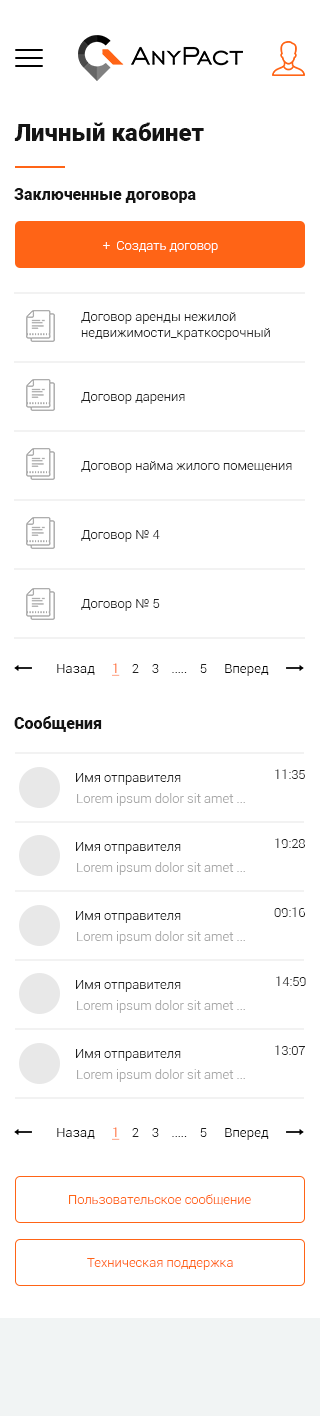
<style>
.page{position:relative;width:320px;height:1416px;background:#ffffff}
.page>*{position:absolute;margin:0}
.t1{font:24px "Roboto-Black";color:#141414}
.t2{font:16px "Roboto-Black";color:#141414}
.t3{font:13px "Roboto-Light";color:#ffffff}
.t4{font:13px "Roboto-Light";color:#1d1d1d}
.t5{font:13px "Roboto-Light";letter-spacing:0.015em;color:#000000}
.t6{font:13px "Roboto-Light";color:#ff6416;text-decoration:underline}
.t7{font:13px "Roboto-Light";color:#a8a8a8}
.t8{font:13px "Roboto-Light";color:#ff6416}
</style>
<div class="page">
<p class="t1" style="left:14px;top:122px;width:190px;height:19px">Личный кабинет</p>
<p class="t2" style="left:14px;top:188px;width:182px;height:15px">Заключенные договора</p>
<p class="t3" style="left:103px;top:241px;width:115px;height:12px">+  Создать договор</p>
<p class="t4" style="left:81px;top:312px;width:189px;height:28px">Договор аренды нежилой<br>недвижимости_краткосрочный</p>
<p class="t4" style="left:81px;top:392px;width:104px;height:12px">Договор дарения</p>
<p class="t4" style="left:81px;top:461px;width:211px;height:12px">Договор найма жилого помещения</p>
<p class="t4" style="left:81px;top:530px;width:79px;height:12px">Договор № 4</p>
<p class="t4" style="left:81px;top:599px;width:79px;height:12px">Договор № 5</p>
<p class="t5" style="left:57px;top:664px;width:38px;height:11px">Назад</p>
<p class="t4" style="left:112px;top:663px;width:95px;height:13px"><span class="t6">1</span>    2    3    .....    5</p>
<p class="t5" style="left:225px;top:664px;width:44px;height:12px">Вперед</p>
<p class="t2" style="left:14px;top:716px;width:88px;height:16px">Сообщения</p>
<p class="t4" style="left:76px;top:773px;width:105px;height:12px">Имя отправителя</p>
<p class="t4" style="left:275px;top:769px;width:30px;height:10px">11:35</p>
<p class="t7" style="left:77px;top:793px;width:168px;height:13px">Lorem ipsum dolor sit amet ...</p>
<p class="t4" style="left:76px;top:842px;width:105px;height:12px">Имя отправителя</p>
<p class="t4" style="left:275px;top:838px;width:30px;height:10px">19:28</p>
<p class="t7" style="left:77px;top:862px;width:168px;height:13px">Lorem ipsum dolor sit amet ...</p>
<p class="t4" style="left:76px;top:911px;width:105px;height:12px">Имя отправителя</p>
<p class="t4" style="left:274px;top:907px;width:31px;height:10px">09:16</p>
<p class="t7" style="left:77px;top:931px;width:168px;height:13px">Lorem ipsum dolor sit amet ...</p>
<p class="t4" style="left:276px;top:976px;width:30px;height:10px">14:59</p>
<p class="t4" style="left:76px;top:980px;width:105px;height:12px">Имя отправителя</p>
<p class="t7" style="left:77px;top:1000px;width:168px;height:13px">Lorem ipsum dolor sit amet ...</p>
<p class="t4" style="left:76px;top:1049px;width:105px;height:12px">Имя отправителя</p>
<p class="t4" style="left:275px;top:1045px;width:30px;height:10px">13:07</p>
<p class="t7" style="left:77px;top:1069px;width:168px;height:13px">Lorem ipsum dolor sit amet ...</p>
<p class="t5" style="left:57px;top:1128px;width:38px;height:11px">Назад</p>
<p class="t4" style="left:112px;top:1127px;width:95px;height:13px"><span class="t6">1</span>    2    3    .....    5</p>
<p class="t5" style="left:225px;top:1128px;width:44px;height:12px">Вперед</p>
<p class="t8" style="left:69px;top:1194px;width:182px;height:11px">Пользовательское сообщение</p>
<p class="t8" style="left:87px;top:1258px;width:146px;height:12px">Техническая поддержка</p>
</div>
